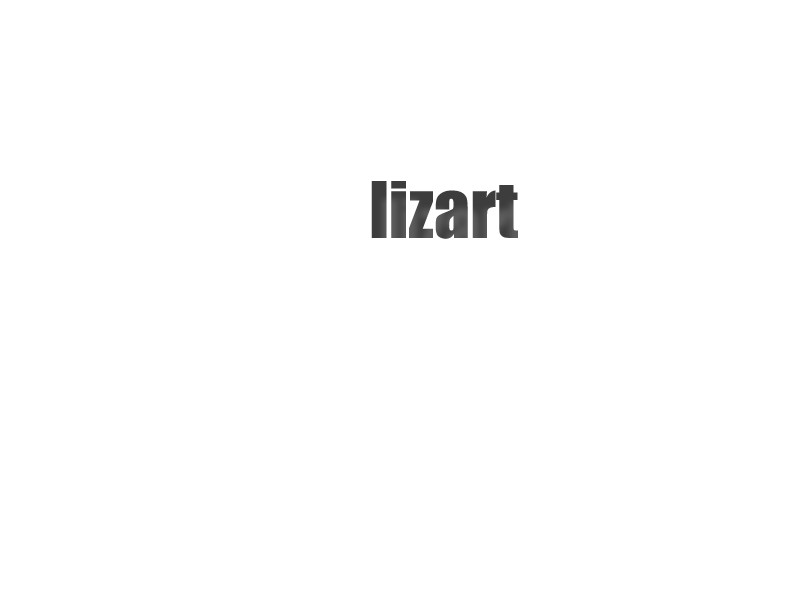
<style>
.page{position:relative;width:800px;height:600px;background:#ffffff}
.page>*{position:absolute;margin:0}
.t1{font:72px "Impact";color:#474747}
</style>
<div class="page">
<p class="t1" style="left:371px;top:181px;width:147px;height:58px">lizart</p>
</div>
